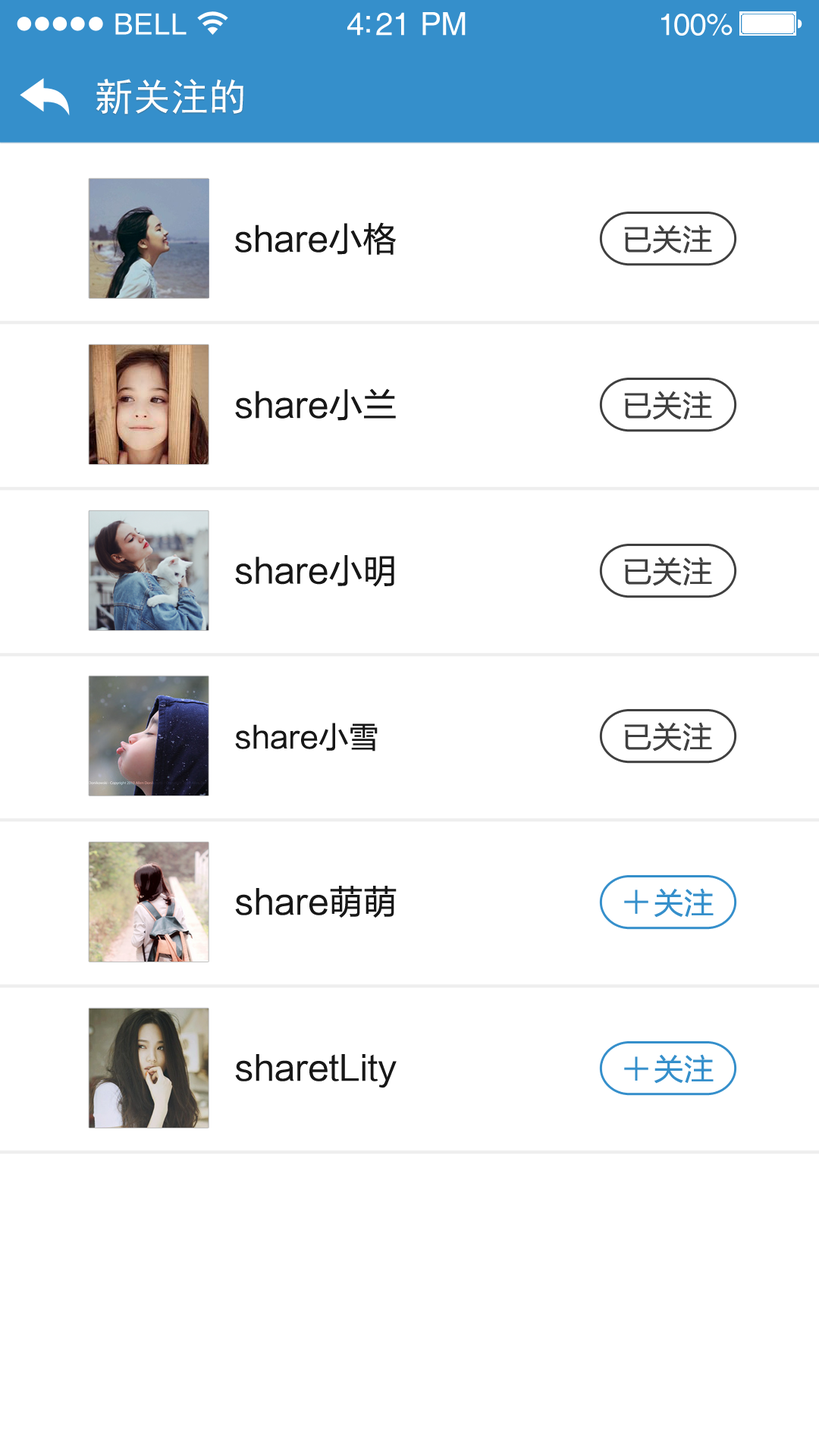
<style>
.page{position:relative;width:819px;height:1456px;background:#ffffff}
.page>*{position:absolute;margin:0}
.t1{font:29.3px "Helvetica";letter-spacing:0.02em;color:#ffffff}
.t2{font:31.8px "Helvetica";letter-spacing:-0.02em;color:#ffffff}
.t3{font:30.6px "Helvetica";letter-spacing:-0.02em;color:#ffffff}
.t4{font:37.9px "SimHei";color:#ffffff}
.t5{font:34.1px "FZLTHJW--GB1-0";color:#171717}
.t6{font:30.3px "FZLTHJW--GB1-0";color:#404040}
.t7{font:30.3px "FZLTHJW--GB1-0";color:#171717}
.t8{font:30.3px "FZLTHJW--GB1-0";color:#358fcb}
</style>
<div class="page">
<p class="t1" style="left:115px;top:13px;width:72px;height:22px">BELL</p>
<p class="t2" style="left:347px;top:12px;width:119px;height:24px">4:21 PM</p>
<p class="t3" style="left:661px;top:14px;width:72px;height:22px">100%</p>
<p class="t4" style="left:96px;top:78px;width:147px;height:37px">新关注的</p>
<p class="t5" style="left:235px;top:222px;width:161px;height:33px">share小格</p>
<p class="t6" style="left:624px;top:224px;width:88px;height:30px">已关注</p>
<p class="t5" style="left:235px;top:388px;width:161px;height:33px">share小兰</p>
<p class="t6" style="left:624px;top:391px;width:88px;height:29px">已关注</p>
<p class="t5" style="left:235px;top:555px;width:159px;height:32px">share小明</p>
<p class="t6" style="left:624px;top:557px;width:88px;height:29px">已关注</p>
<p class="t7" style="left:235px;top:723px;width:143px;height:28px">share小雪</p>
<p class="t6" style="left:624px;top:722px;width:88px;height:29px">已关注</p>
<p class="t5" style="left:235px;top:886px;width:162px;height:32px">share萌萌</p>
<p class="t8" style="left:654px;top:888px;width:60px;height:30px">关注</p>
<p class="t5" style="left:235px;top:1054px;width:162px;height:34px">sharetLity</p>
<p class="t8" style="left:654px;top:1054px;width:60px;height:30px">关注</p>
</div>
